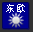
<style>
.page{position:relative;width:33px;height:32px;background:#000090}
.page>*{position:absolute;margin:0}
.t1{font:10.4px "SimSun";color:#ffffff}
</style>
<div class="page">
<p class="t1" style="left:6px;top:4px;width:19px;height:9px">东欧</p>
</div>
